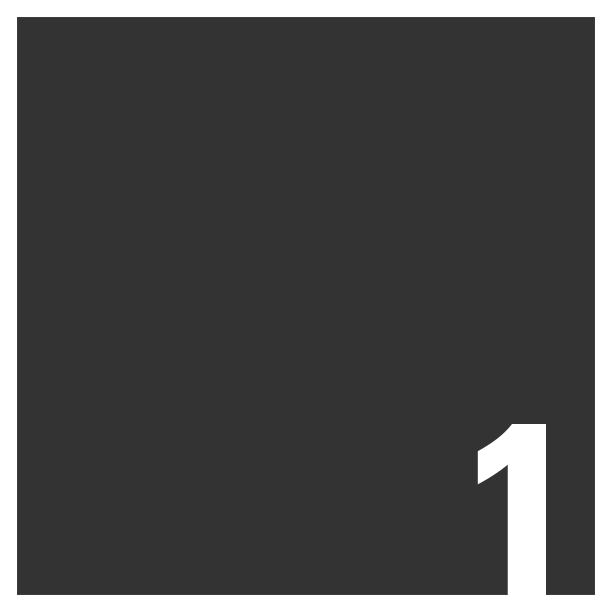
<style>
.page{position:relative;width:612px;height:612px;background:#333333}
.page>*{position:absolute;margin:0}
.t1{font:251.9px "UniversLTStd-BoldCn";letter-spacing:-0.05em;color:#ffffff}
</style>
<div class="page">
<p class="t1" style="left:477px;top:424px;width:69px;height:176px">1</p>
</div>
